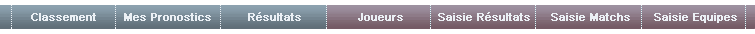
<style>
.page{position:relative;width:755px;height:34px;background:#ffffff}
.page>*{position:absolute;margin:0}
.t1{font:11px "ArialMT";color:#ebf0f5;font-weight:bold}
</style>
<div class="page">
<p class="t1" style="left:31px;top:13px;width:65px;height:8px">Classement</p>
<p class="t1" style="left:124px;top:13px;width:87px;height:8px">Mes Pronostics</p>
<p class="t1" style="left:248px;top:12px;width:53px;height:9px">Résultats</p>
<p class="t1" style="left:358px;top:13px;width:45px;height:8px">Joueurs</p>
<p class="t1" style="left:438px;top:12px;width:92px;height:9px">Saisie Résultats</p>
<p class="t1" style="left:551px;top:13px;width:79px;height:8px">Saisie Matchs</p>
<p class="t1" style="left:654px;top:13px;width:83px;height:10px">Saisie Equipes</p>
</div>
